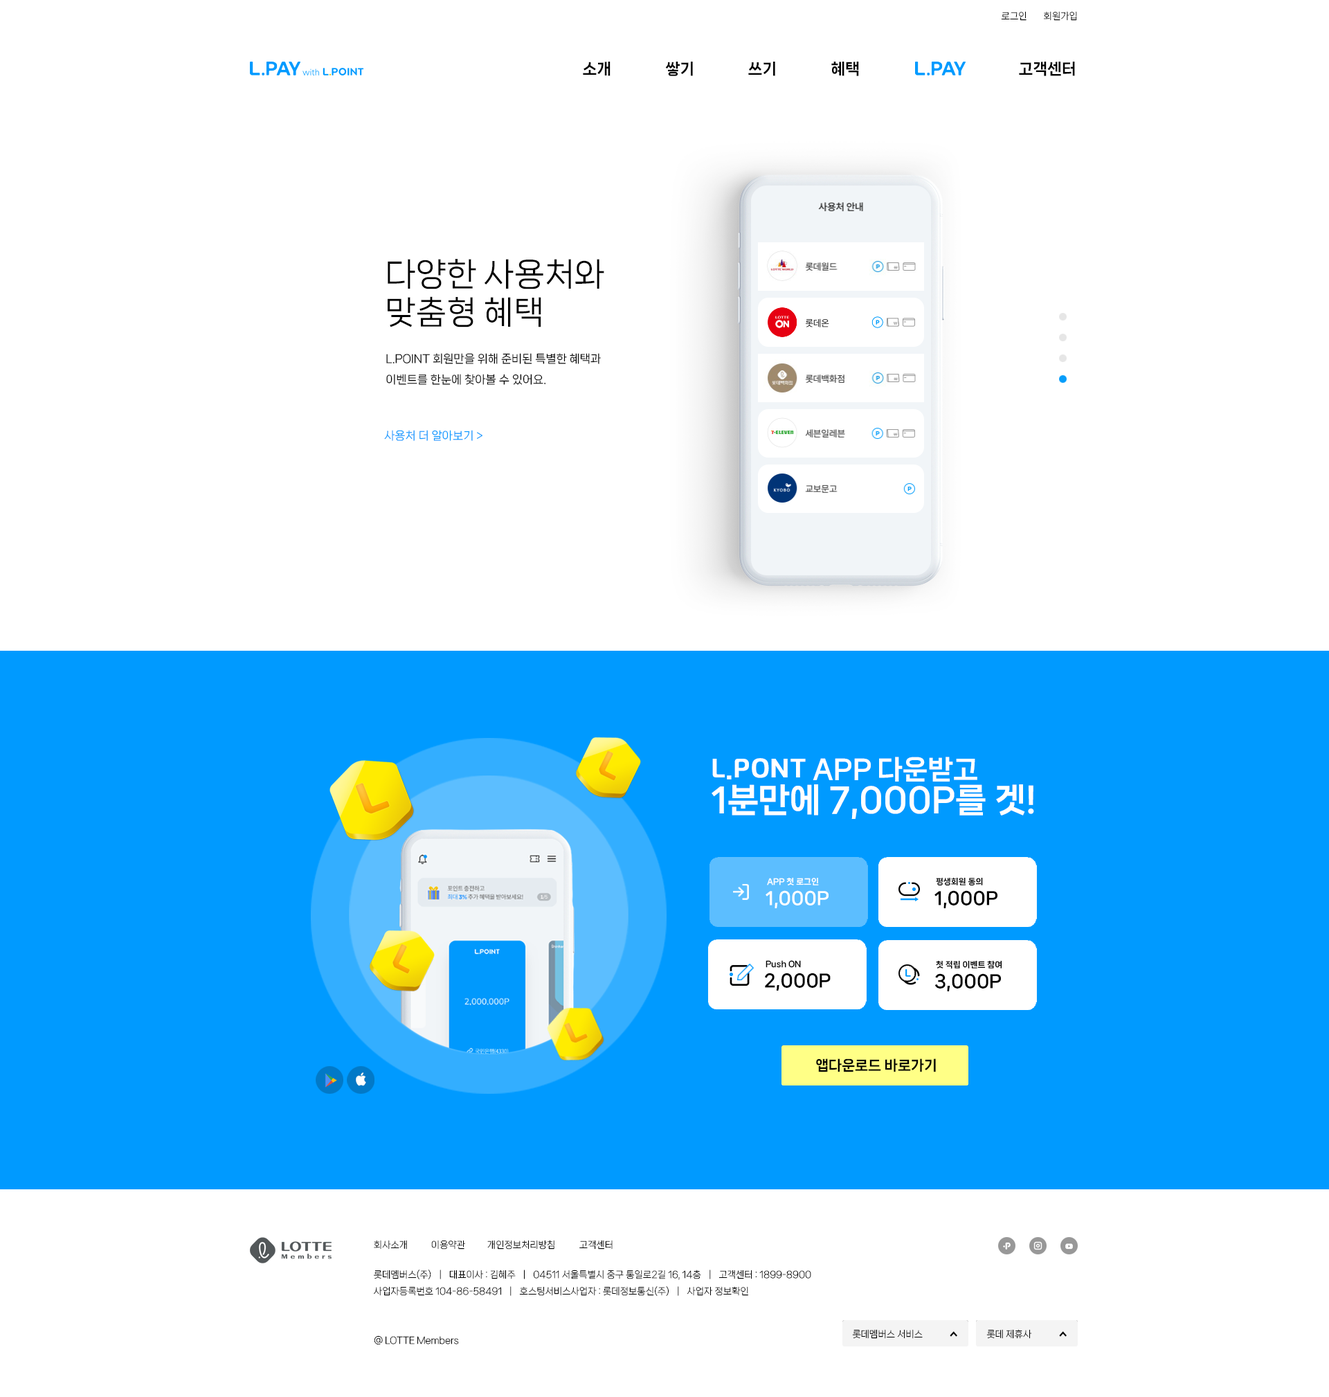
<style>
.page{position:relative;width:1329px;height:1397px;background:#ffffff}
.page>*{position:absolute;margin:0}
.t1{font:9px "NanumSquareNeoTTF-aLt";color:#000000}
.t2{font:15.2px "NanumSquareNeoTTF-dEb";color:#000000}
.t3{font:11.1px "NanumSquareNeoTTF-bRg";color:#000000}
.t4{font:31.8px "NanumSquareNeoTTF-bRg";color:#000000}
.t5{font:11.1px "NanumSquareNeoTTF-bRg";color:#009aff}
.t6{font:33px/33px "NanumSquareNeoTTF-dEb";color:#ffffff}
.t7{font:26.4px/33px "GyeonggiTitleV";color:#ffffff}
.t8{font:26.4px/33px "NanumSquareNeoTTF-dEb";color:#ffffff}
.t9{font:8px "NanumSquareNeoTTF-dEb";color:#ffffff}
.t10{font:8px "NanumSquareNeoTTF-dEb";color:#000000}
.t11{font:17.3px "NanumSquareNeoTTF-dEb";color:#ffffff}
.t12{font:17.3px "NanumSquareNeoTTF-dEb";color:#000000}
.t13{font:13.8px "NanumSquareNeoTTF-dEb";color:#000000}
</style>
<div class="page">
<p class="t1" style="left:1001px;top:11px;width:26px;height:10px">로그인</p>
<p class="t1" style="left:1044px;top:11px;width:33px;height:10px">회원가입</p>
<p class="t2" style="left:583px;top:62px;width:28px;height:14px">소개</p>
<p class="t2" style="left:665px;top:62px;width:28px;height:14px">쌓기</p>
<p class="t2" style="left:748px;top:62px;width:27px;height:14px">쓰기</p>
<p class="t2" style="left:831px;top:62px;width:28px;height:14px">혜택</p>
<p class="t2" style="left:1019px;top:62px;width:56px;height:14px">고객센터</p>
<p class="t3" style="left:386px;top:259px;width:218px;height:126px"><span class="t4">다양한 사용처와<br>맞춤형 혜택<br></span><br><br>L.POINT 회원만을 위해 준비된 특별한 혜택과<br>이벤트를 한눈에 찾아볼 수 있어요.</p>
<p class="t5" style="left:384px;top:430px;width:99px;height:11px">사용처 더 알아보기 &gt;</p>
<p class="t6" style="left:712px;top:757px;width:322px;height:62px"><span class="t7">L.PONT </span><span class="t8">APP 다운받고<br></span>1분만에 7,000P를 겟!</p>
<p class="t9" style="left:767px;top:877px;width:52px;height:8px">APP 첫 로그인</p>
<p class="t10" style="left:936px;top:877px;width:47px;height:9px">평생회원 동의</p>
<p class="t11" style="left:766px;top:890px;width:63px;height:18px">1,000P</p>
<p class="t12" style="left:935px;top:890px;width:63px;height:18px">1,000P</p>
<p class="t10" style="left:766px;top:960px;width:35px;height:8px">Push ON</p>
<p class="t10" style="left:936px;top:960px;width:66px;height:9px">첫 적립 이벤트 참여</p>
<p class="t12" style="left:765px;top:973px;width:66px;height:18px">2,000P</p>
<p class="t12" style="left:935px;top:973px;width:66px;height:18px">3,000P</p>
<p class="t13" style="left:816px;top:1059px;width:120px;height:13px">앱다운로드 바로가기</p>
<p class="t1" style="left:374px;top:1240px;width:33px;height:10px">회사소개</p>
<p class="t1" style="left:431px;top:1240px;width:34px;height:10px">이용약관</p>
<p class="t1" style="left:487px;top:1240px;width:68px;height:10px">개인정보처리방침</p>
<p class="t1" style="left:579px;top:1240px;width:34px;height:10px">고객센터</p>
<p class="t1" style="left:374px;top:1270px;width:437px;height:10px">롯데멤버스(주)  │  대표이사 : 김혜주  │  04511 서울특별시 중구 통일로2길 16, 14층  │  고객센터 : 1899-8900</p>
<p class="t1" style="left:374px;top:1286px;width:374px;height:10px">사업자등록번호 104-86-58491  │  호스팅서비스사업자 : 롯데정보통신(주)  │  사업자 정보확인</p>
<p class="t1" style="left:374px;top:1335px;width:85px;height:10px">@ LOTTE Members</p>
<p class="t1" style="left:852px;top:1329px;width:71px;height:10px">롯데멤버스 서비스</p>
<p class="t1" style="left:987px;top:1329px;width:45px;height:10px">롯데 제휴사</p>
</div>
